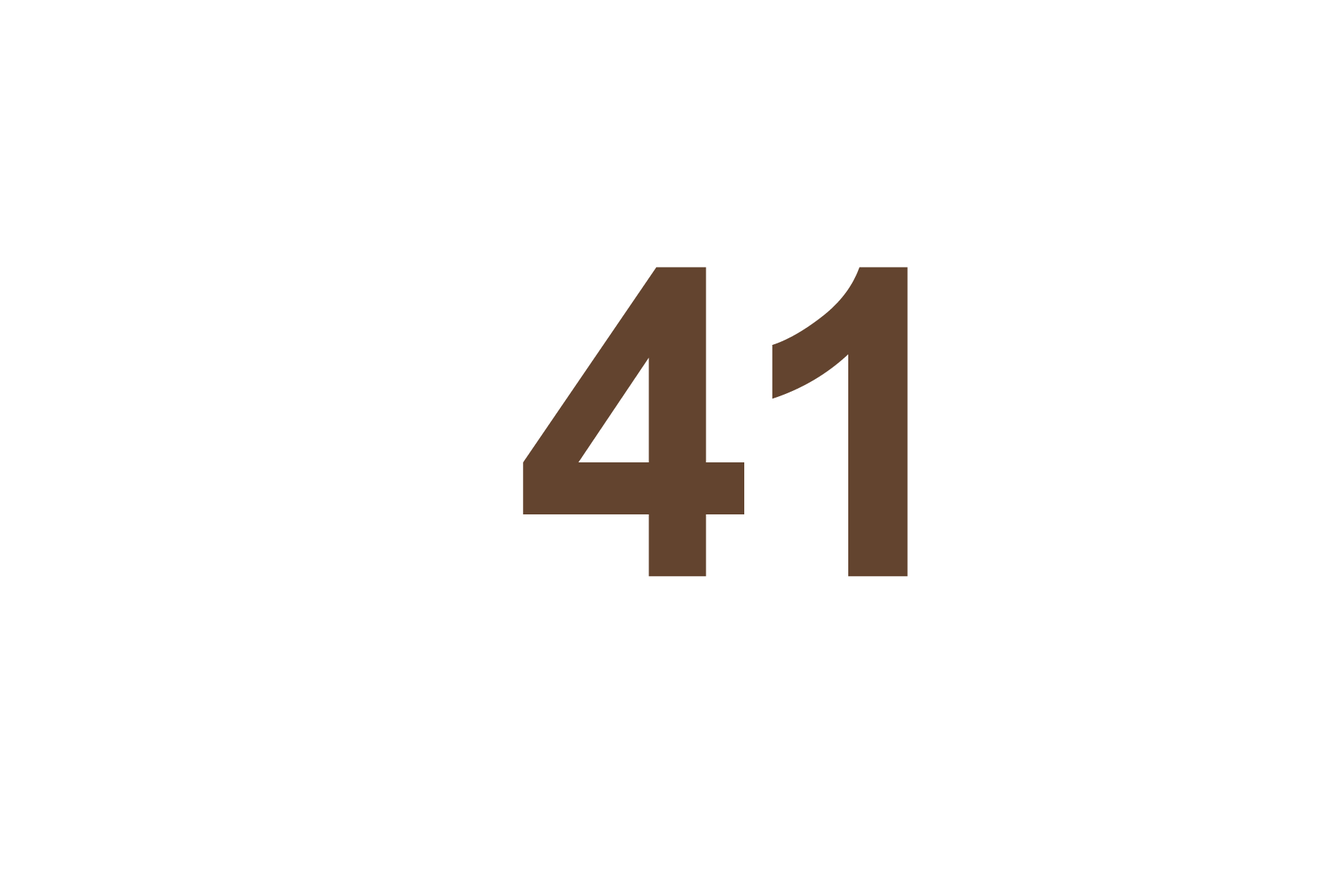
<style>
.page{position:relative;width:1337px;height:892px;background:#ffffff}
.page>*{position:absolute;margin:0}
.t1{font:429.6px "Arial-BoldMT";color:#63442f}
</style>
<div class="page">
<p class="t1" style="left:523px;top:267px;width:385px;height:310px">41</p>
</div>
